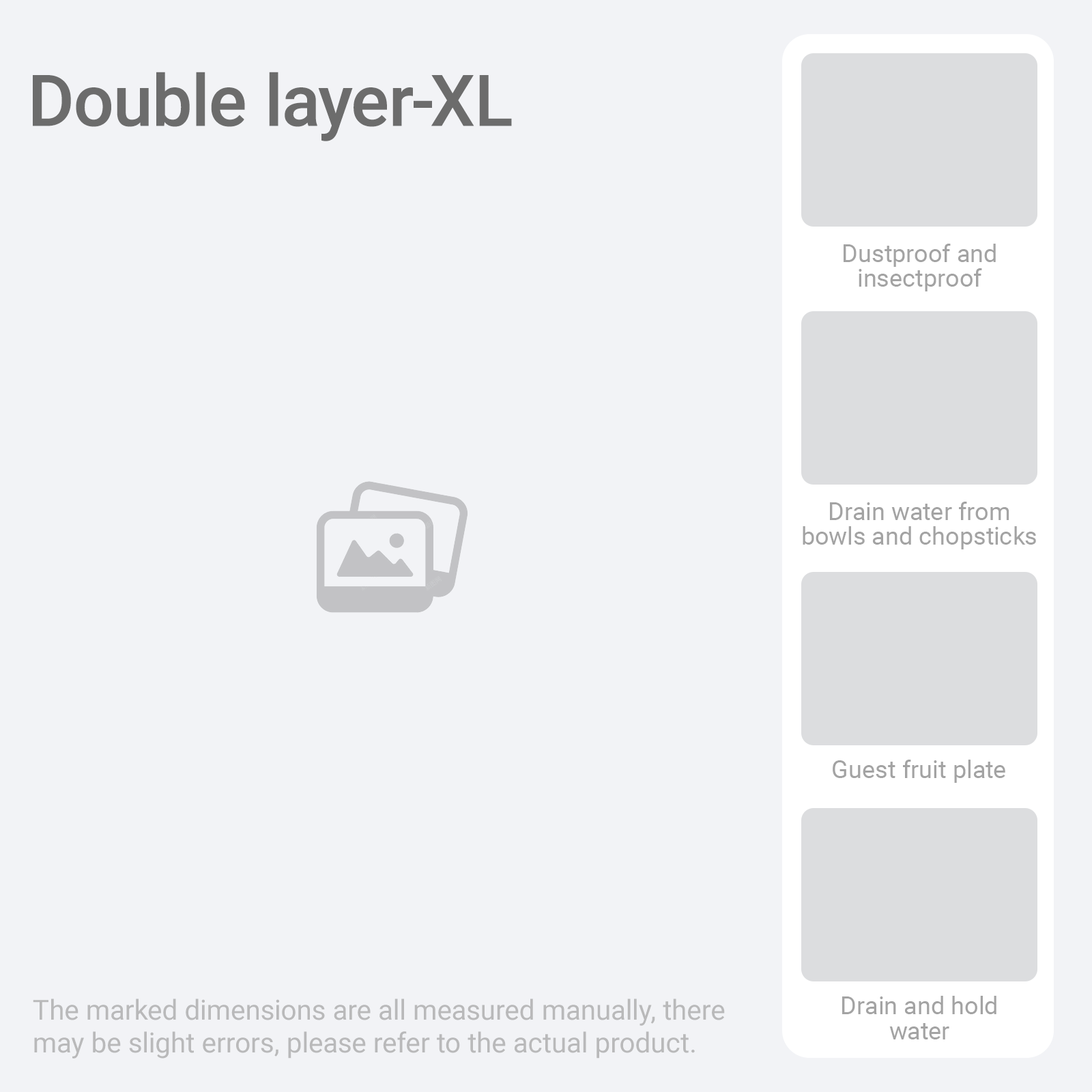
<style>
.page{position:relative;width:1092px;height:1092px;background:#f2f3f6}
.page>*{position:absolute;margin:0}
.t1{font:71.3px "Roboto-Medium";color:#6c6c6c}
.t2{font:24.8px/24.8px "Roboto-Regular";color:#a3a3a3}
.t3{font:24.8px "Roboto-Regular";color:#a3a3a3}
.t4{font:27.7px/32.8px "Roboto-Regular";color:#a3a3a3}
</style>
<div class="page">
<p class="t1" style="left:33px;top:72px;width:479px;height:69px">Double layer-XL</p>
<p class="t2" style="left:844px;top:244px;width:152px;height:47px;text-align:center">Dustproof and<br>insectproof</p>
<p class="t2" style="left:803px;top:502px;width:233px;height:47px;text-align:center">Drain water from<br>bowls and chopsticks</p>
<p class="t3" style="left:833px;top:760px;width:172px;height:23px">Guest fruit plate</p>
<p class="t4" style="left:33px;top:998px;width:692px;height:61px;opacity:0.75">The marked dimensions are all measured manually, there may be slight errors, please refer to the actual product.</p>
<p class="t2" style="left:842px;top:996px;width:154px;height:43px;text-align:center">Drain and hold<br>water</p>
</div>
